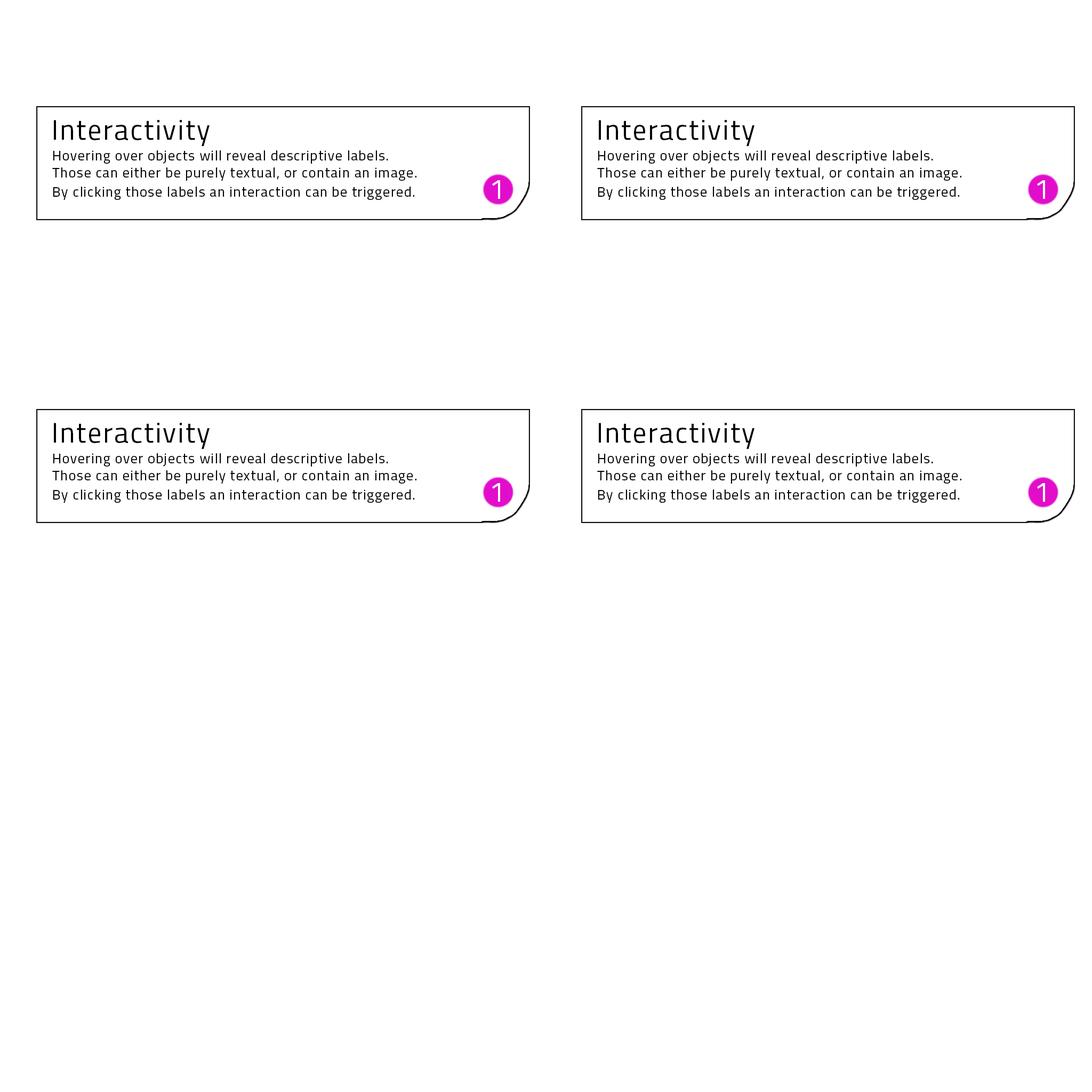
<style>
.page{position:relative;width:1092px;height:1092px;background:#ffffff}
.page>*{position:absolute;margin:0}
.t1{font:28.3px "Titillium-Regular";letter-spacing:0.05em;color:#010101}
.t2{font:14.2px "Titillium-Regular";letter-spacing:0.05em;color:#000000}
.t3{font:28.3px "Titillium-Regular";letter-spacing:0.05em;color:#ffffff}
</style>
<div class="page">
<p class="t1" style="left:54px;top:120px;width:156px;height:26px">Interactivity</p>
<p class="t1" style="left:599px;top:120px;width:155px;height:26px">Interactivity</p>
<p class="t2" style="left:53px;top:150px;width:335px;height:14px">Hovering over objects will reveal descriptive labels.</p>
<p class="t2" style="left:598px;top:150px;width:335px;height:14px">Hovering over objects will reveal descriptive labels.</p>
<p class="t2" style="left:52px;top:167px;width:364px;height:14px">Those can either be purely textual, or contain an image.</p>
<p class="t2" style="left:597px;top:167px;width:364px;height:14px">Those can either be purely textual, or contain an image.</p>
<p class="t3" style="left:492px;top:180px;width:8px;height:19px">1</p>
<p class="t3" style="left:1037px;top:180px;width:8px;height:19px">1</p>
<p class="t2" style="left:53px;top:187px;width:361px;height:13px">By clicking those labels an interaction can be triggered.</p>
<p class="t2" style="left:598px;top:187px;width:361px;height:13px">By clicking those labels an interaction can be triggered.</p>
<p class="t1" style="left:54px;top:423px;width:156px;height:26px">Interactivity</p>
<p class="t1" style="left:599px;top:423px;width:155px;height:26px">Interactivity</p>
<p class="t2" style="left:53px;top:453px;width:335px;height:14px">Hovering over objects will reveal descriptive labels.</p>
<p class="t2" style="left:598px;top:453px;width:335px;height:14px">Hovering over objects will reveal descriptive labels.</p>
<p class="t2" style="left:52px;top:470px;width:364px;height:14px">Those can either be purely textual, or contain an image.</p>
<p class="t2" style="left:597px;top:470px;width:364px;height:14px">Those can either be purely textual, or contain an image.</p>
<p class="t3" style="left:492px;top:483px;width:8px;height:19px">1</p>
<p class="t3" style="left:1037px;top:483px;width:8px;height:19px">1</p>
<p class="t2" style="left:53px;top:489px;width:361px;height:14px">By clicking those labels an interaction can be triggered.</p>
<p class="t2" style="left:598px;top:489px;width:361px;height:14px">By clicking those labels an interaction can be triggered.</p>
</div>
